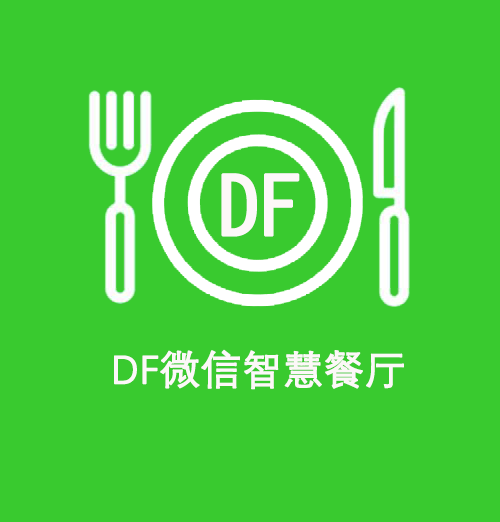
<style>
.page{position:relative;width:500px;height:522px;background:#39ca2f}
.page>*{position:absolute;margin:0}
.t1{font:80px "MS-Gothic";color:#fcf8f8;font-weight:bold}
.t2{font:40px "DengXian";color:#fcf8f8;font-weight:bold}
</style>
<div class="page">
<p class="t1" style="left:221px;top:173px;width:79px;height:64px">DF</p>
<p class="t2" style="left:114px;top:349px;width:290px;height:41px">DF微信智慧餐厅</p>
</div>
